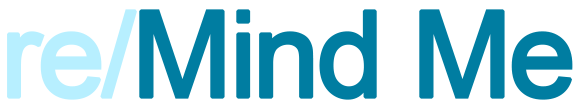
<style>
.page{position:relative;width:580px;height:108px;background:#ffffff}
.page>*{position:absolute;margin:0}
.t1{font:120px "ArialMT";letter-spacing:-0.05em;color:#007da1;font-weight:bold}
.t2{font:120px "ArialMT";letter-spacing:-0.05em;color:#b7efff;font-weight:bold}
</style>
<div class="page">
<p class="t1" style="left:7px;top:9px;width:566px;height:91px"><span class="t2">re/</span>Mind Me</p>
</div>
